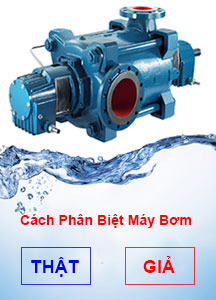
<style>
.page{position:relative;width:216px;height:300px}
.page>*{position:absolute;margin:0}
.t1{font:14px "Arial-BoldMT";color:#ff0000}
.t2{font:18px "Arial-BoldMT";color:#0000ff}
.t3{font:18px "Arial-BoldMT";color:#ff0000}
</style>
<div class="page">
<p class="t1" style="left:20px;top:214px;width:172px;height:14px">Cách Phân Biệt Máy Bơm</p>
<p class="t2" style="left:31px;top:257px;width:48px;height:20px">THẬT</p>
<p class="t3" style="left:143px;top:256px;width:32px;height:17px">GIẢ</p>
</div>
